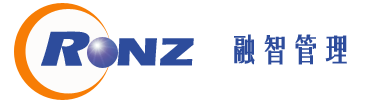
<style>
.page{position:relative;width:388px;height:104px;background:#ffffff}
.page>*{position:absolute;margin:0}
.t1{font:40px "ErasITC-Bold";letter-spacing:0.005em;color:#2d4c9c;font-weight:bold;scale:1.3 1}
.t2{font:50px "ErasITC-Bold";letter-spacing:0.005em;color:#2d4c9c;font-weight:bold;font-style:italic;scale:1.3 1}
.t3{font:30px "FZYTK--GBK1-0";letter-spacing:0.005em;color:#2d4c9c;font-weight:bold}
</style>
<div class="page">
<p class="t1" style="left:41px;top:31px;width:153px;height:35px"><span class="t2">R  </span>NZ</p>
<p class="t3" style="left:234px;top:34px;width:113px;height:31px">融智管理</p>
</div>
